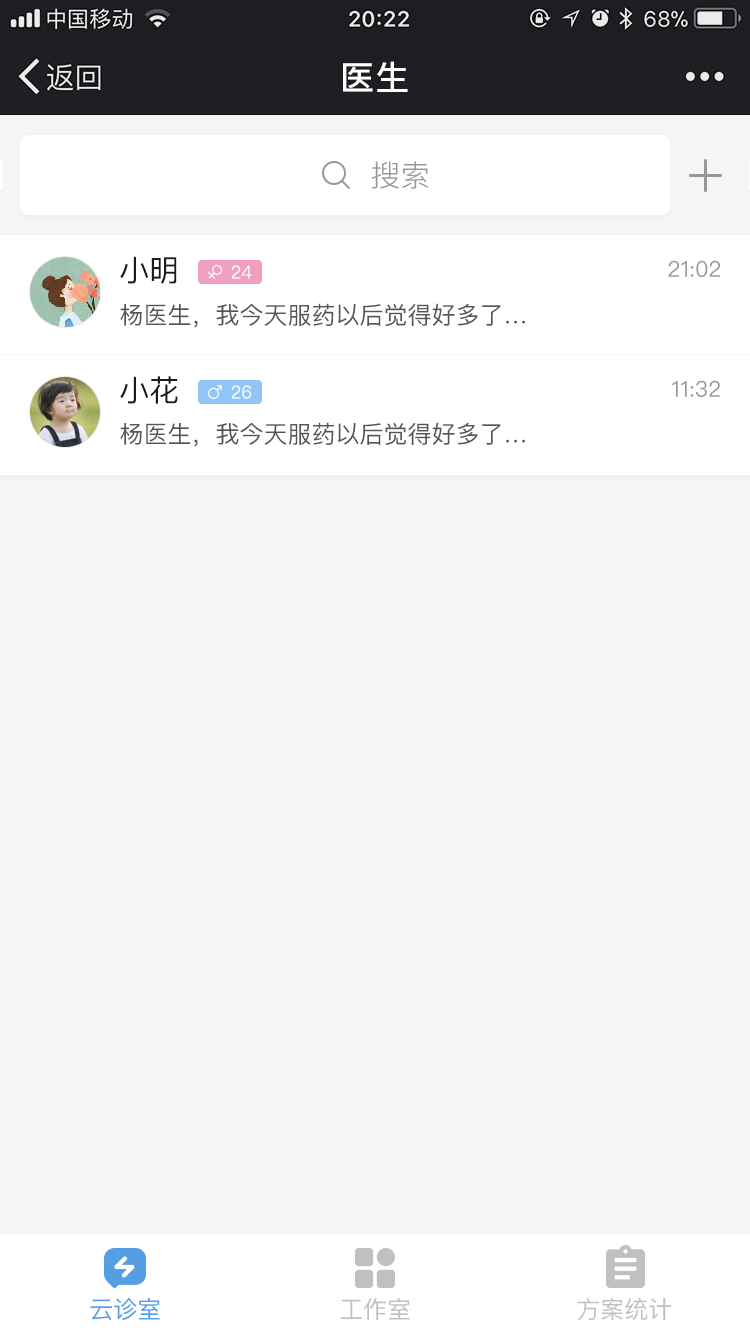
<style>
.page{position:relative;width:750px;height:1334px;background:#f5f5f5}
.page>*{position:absolute;margin:0}
.t1{font:34px "SourceHanSansCN-Medium";letter-spacing:0.02em;color:#ffffff}
.t2{font:30px "PingFangSC-Light";color:#979797}
.t3{font:30px "PingFangSC-Regular";color:#1b1b1f}
.t4{font:18px "PingFangSC-Regular";color:#ffffff}
.t5{font:22px "PingFangSC-Regular";color:#979797}
.t6{font:24px "PingFangSC-Regular";color:#555555}
.t7{font:24px "PingFangSC-Regular";color:#569ee3}
.t8{font:24px "PingFangSC-Regular";color:#c0c0c0}
</style>
<div class="page">
<p class="t1" style="left:343px;top:61px;width:65px;height:31px">医生</p>
<p class="t2" style="left:371px;top:161px;width:57px;height:28px">搜索</p>
<p class="t3" style="left:120px;top:256px;width:57px;height:28px">小明</p>
<p class="t4" style="left:231px;top:265px;width:21px;height:14px">24</p>
<p class="t5" style="left:668px;top:260px;width:52px;height:17px">21:02</p>
<p class="t6" style="left:120px;top:303px;width:405px;height:25px">杨医生，我今天服药以后觉得好多了…</p>
<p class="t3" style="left:120px;top:376px;width:58px;height:28px">小花</p>
<p class="t4" style="left:231px;top:385px;width:21px;height:14px">26</p>
<p class="t5" style="left:672px;top:380px;width:48px;height:17px">11:32</p>
<p class="t6" style="left:120px;top:422px;width:405px;height:25px">杨医生，我今天服药以后觉得好多了…</p>
<p class="t7" style="left:90px;top:1298px;width:70px;height:23px">云诊室</p>
<p class="t8" style="left:340px;top:1298px;width:70px;height:23px">工作室</p>
<p class="t8" style="left:577px;top:1298px;width:95px;height:23px">方案统计</p>
</div>
